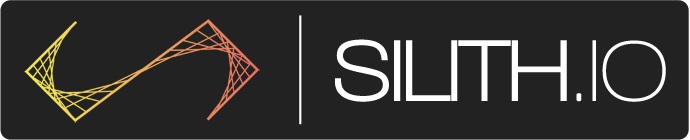
<style>
.page{position:relative;width:690px;height:140px;background:#222222}
.page>*{position:absolute;margin:0}
.t1{font:89.4px "WalkwayUltraBold";color:#ffffff}
.t2{font:89.4px "WalkwayBold";color:#ffffff}
.t3{font:89.4px "WalkwaySemiBold";color:#ffffff}
</style>
<div class="page">
<p class="t1" style="left:335px;top:39px;width:331px;height:63px">SILITH<span class="t2">.</span><span class="t3">IO</span></p>
</div>
